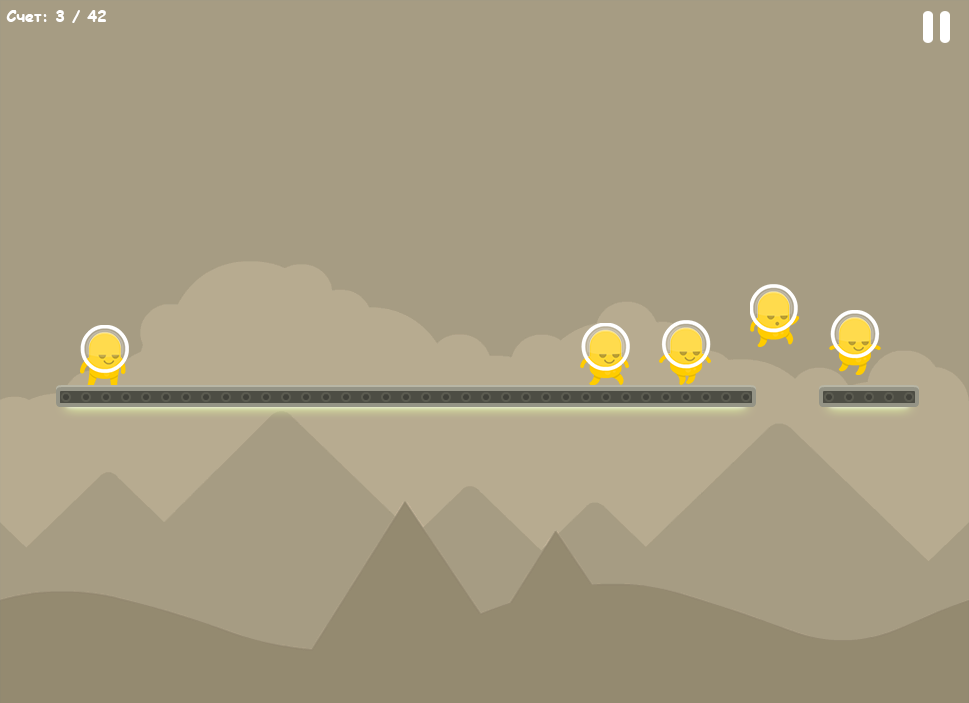
<style>
.page{position:relative;width:969px;height:703px;background:#a69c83}
.page>*{position:absolute;margin:0}
.t1{font:16px "ComicSansMS-Bold";color:#ffffff}
</style>
<div class="page">
<p class="t1" style="left:6px;top:10px;width:100px;height:13px">Счет: 3 / 42</p>
</div>
